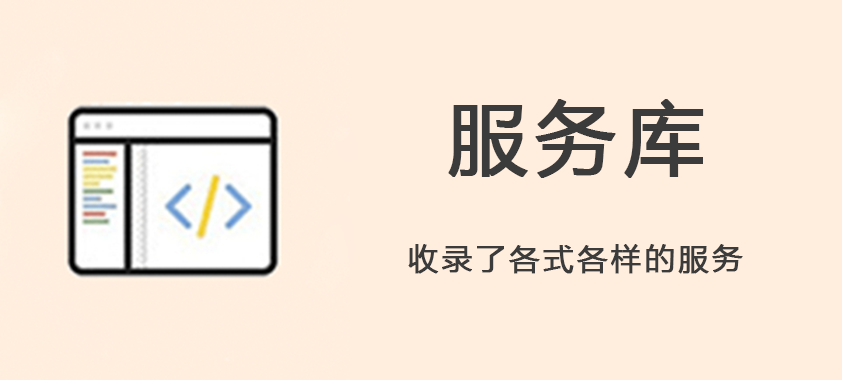
<style>
.page{position:relative;width:842px;height:380px;background:#ffeede}
.page>*{position:absolute;margin:0}
.t1{font:78.7px "MicrosoftYaHei";letter-spacing:0.1em;color:#3b3b3b;font-weight:bold}
.t2{font:30px "MicrosoftYaHei";letter-spacing:0.1em;color:#3b3b3b;font-weight:bold}
</style>
<div class="page">
<p class="t1" style="left:448px;top:99px;width:256px;height:79px">服务库</p>
<p class="t2" style="left:408px;top:244px;width:335px;height:30px">收录了各式各样的服务</p>
</div>
